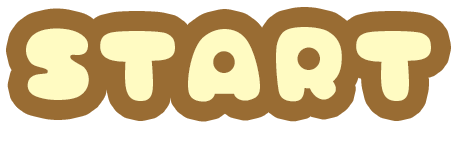
<style>
.page{position:relative;width:453px;height:142px;background:#996c33}
.page>*{position:absolute;margin:0}
.t1{font:100px "AmeChanPopMaruLight-Regular";letter-spacing:0.08em;color:#fffbc2}
</style>
<div class="page">
<p class="t1" style="left:26px;top:27px;width:405px;height:75px">START</p>
</div>
